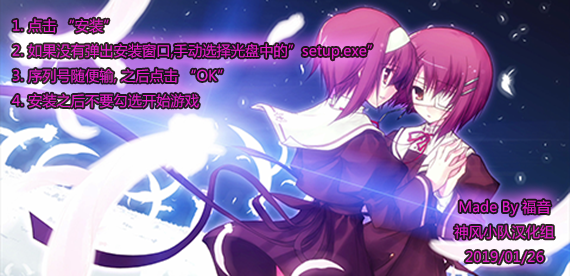
<style>
.page{position:relative;width:570px;height:276px}
.page>*{position:absolute;margin:0}
.t1{font:14.3px "MicrosoftYaHei";color:#e61ecc}
</style>
<div class="page">
<p class="t1" style="left:12px;top:18px;width:360px;height:90px">1. 点击 “安装”<br>2. 如果没有弹出安装窗口,手动选择光盘中的”setup.exe”<br>3. 序列号随便输, 之后点击 “OK”<br>4. 安装之后不要勾选开始游戏</p>
<p class="t1" style="left:454px;top:200px;width:100px;height:64px;text-align:center">Made By 福音<br>神风小队汉化组<br>2019/01/26</p>
</div>
